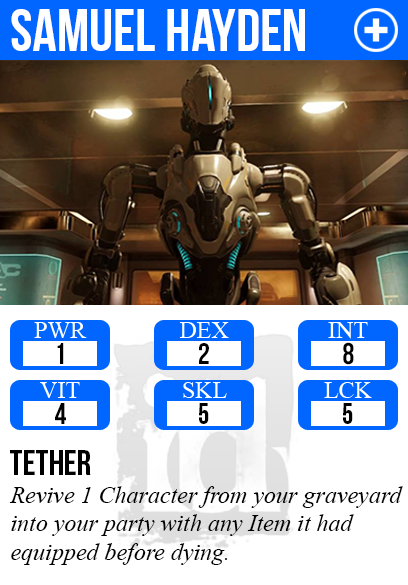
<style>
.page{position:relative;width:408px;height:585px;background:#ffffff}
.page>*{position:absolute;margin:0}
.t1{font:60px "BebasNeue";color:#ffffff}
.t2{font:29.9px "BebasNeue";color:#000000}
.t3{font:36px "BebasNeue";color:#000000}
.t4{font:24px "TimesNewRomanPS-ItalicMT";color:#000000}
</style>
<div class="page">
<p class="t1" style="left:11px;top:9px;width:294px;height:42px">Samuel hayden</p>
<p class="t2" style="left:343px;top:342px;width:11px;height:23px">8</p>
<p class="t2" style="left:57px;top:343px;width:7px;height:21px">1</p>
<p class="t2" style="left:199px;top:343px;width:10px;height:21px">2</p>
<p class="t2" style="left:55px;top:403px;width:11px;height:21px">4</p>
<p class="t2" style="left:199px;top:403px;width:10px;height:21px">5</p>
<p class="t2" style="left:343px;top:403px;width:10px;height:21px">5</p>
<p class="t3" style="left:10px;top:450px;width:81px;height:25px">tether</p>
<p class="t4" style="left:9px;top:486px;width:394px;height:79px">Revive 1 Character from your graveyard<br>into your party with any Item it had<br>equipped before dying.</p>
</div>
